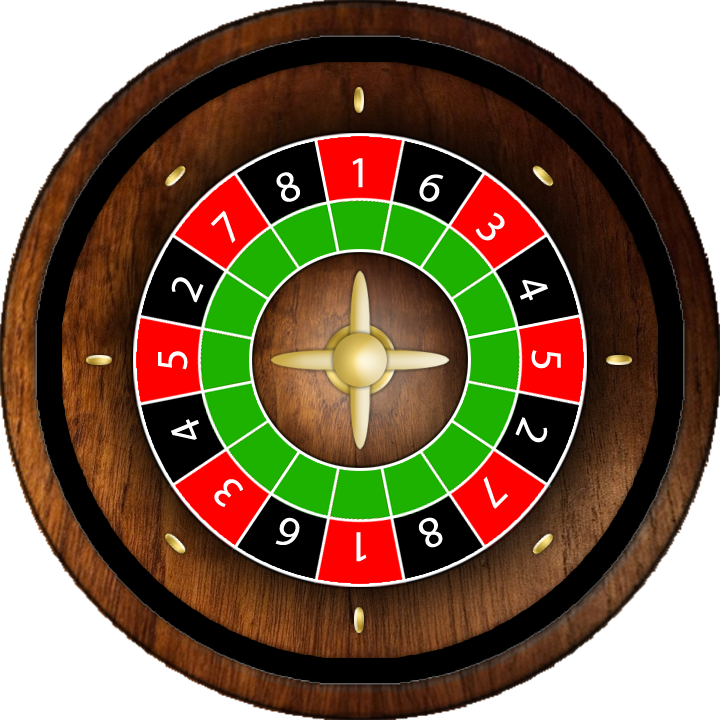
<style>
.page{position:relative;width:720px;height:720px;background:#ffffff}
.page>*{position:absolute;margin:0}
.t1{font:44px "MyriadPro-Regular";color:#ffffff}
</style>
<div class="page">
<p class="t1" style="left:352px;top:158px;width:11px;height:30px">1</p>
<p class="t1" style="left:276px;top:172px;width:24px;height:30px;rotate:-23deg">8</p>
<p class="t1" style="left:419px;top:174px;width:25px;height:28px;rotate:22deg">6</p>
<p class="t1" style="left:210px;top:210px;width:26px;height:33px;rotate:-45deg">7</p>
<p class="t1" style="left:475px;top:212px;width:30px;height:29px;rotate:45deg">3</p>
<p class="t1" style="left:171px;top:277px;width:33px;height:26px;rotate:-68deg">2</p>
<p class="t1" style="left:520px;top:279px;width:28px;height:22px;rotate:67deg">4</p>
<p class="t1" style="left:158px;top:351px;width:30px;height:19px;rotate:-90deg">5</p>
<p class="t1" style="left:531px;top:350px;width:30px;height:19px;rotate:90deg">5</p>
<p class="t1" style="left:171px;top:419px;width:28px;height:21px;rotate:-113deg">4</p>
<p class="t1" style="left:515px;top:417px;width:33px;height:26px;rotate:112deg">2</p>
<p class="t1" style="left:214px;top:479px;width:30px;height:28px;rotate:-135deg">3</p>
<p class="t1" style="left:483px;top:476px;width:25px;height:33px;rotate:135deg">7</p>
<p class="t1" style="left:275px;top:517px;width:25px;height:28px;rotate:-158deg">6</p>
<p class="t1" style="left:418px;top:517px;width:25px;height:31px;rotate:157deg">8</p>
<p class="t1" style="left:356px;top:532px;width:11px;height:30px;rotate:180deg">1</p>
</div>
